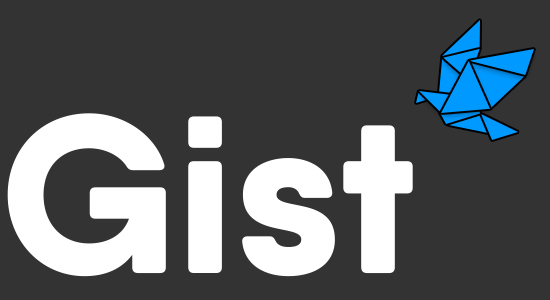
<style>
.page{position:relative;width:550px;height:300px;background:#333333}
.page>*{position:absolute;margin:0}
.t1{font:223.6px "QanelasSoftDEMO-ExtraBold";color:#ffffff}
</style>
<div class="page">
<p class="t1" style="left:7px;top:113px;width:406px;height:164px">Gist</p>
</div>
